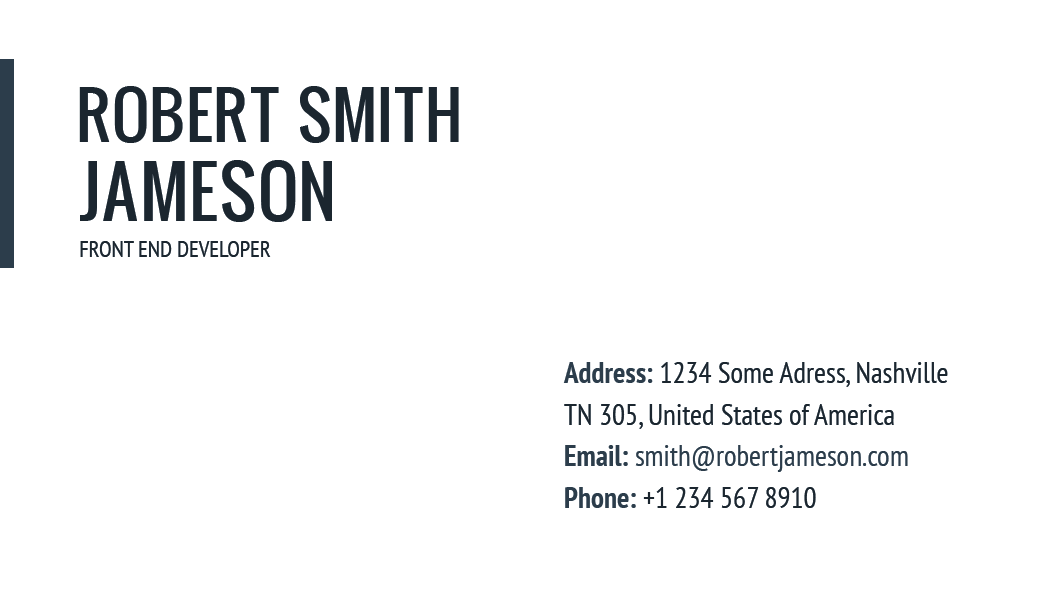
<style>
.page{position:relative;width:1063px;height:591px;background:#ffffff}
.page>*{position:absolute;margin:0}
.t1{font:63.2px "Oswald";color:#1b262f;text-transform:uppercase}
.t2{font:68.5px "Oswald";color:#1b262f;text-transform:uppercase}
.t3{font:68.5px "Oswald";color:#141819;text-transform:uppercase}
.t4{font:22.8px "PTSans-Narrow";color:#1b262f}
.t5{font:29.2px/41.7px "PTSans-Narrow";color:#1b262f}
.t6{font:29.2px/41.7px "PTSans-NarrowBold";color:#2c3d4b;text-transform:uppercase}
.t7{font:29.2px/41.7px "PTSans-NarrowBold";color:#2c3d4b}
.t8{font:29.2px/41.7px "PTSans-Narrow";color:#2c3d4b}
</style>
<div class="page">
<p class="t1" style="left:79px;top:86px;width:380px;height:57px">ROBERT Smith</p>
<p class="t2" style="left:80px;top:160px;width:252px;height:62px"><span class="t3"><br></span>jAMESON</p>
<p class="t4" style="left:80px;top:241px;width:191px;height:16px">FRONT END DEVELOPER</p>
<p class="t5" style="left:563px;top:362px;width:385px;height:146px"><span class="t6">a</span><span class="t7">ddress: </span>1234 Some Adress, Nashville<br>TN 305, United States of America<br><span class="t6">e</span><span class="t7">mail: </span><span class="t8">smith@robertjameson.com<br></span><span class="t7">Phone: </span>+1 234 567 8910</p>
</div>
